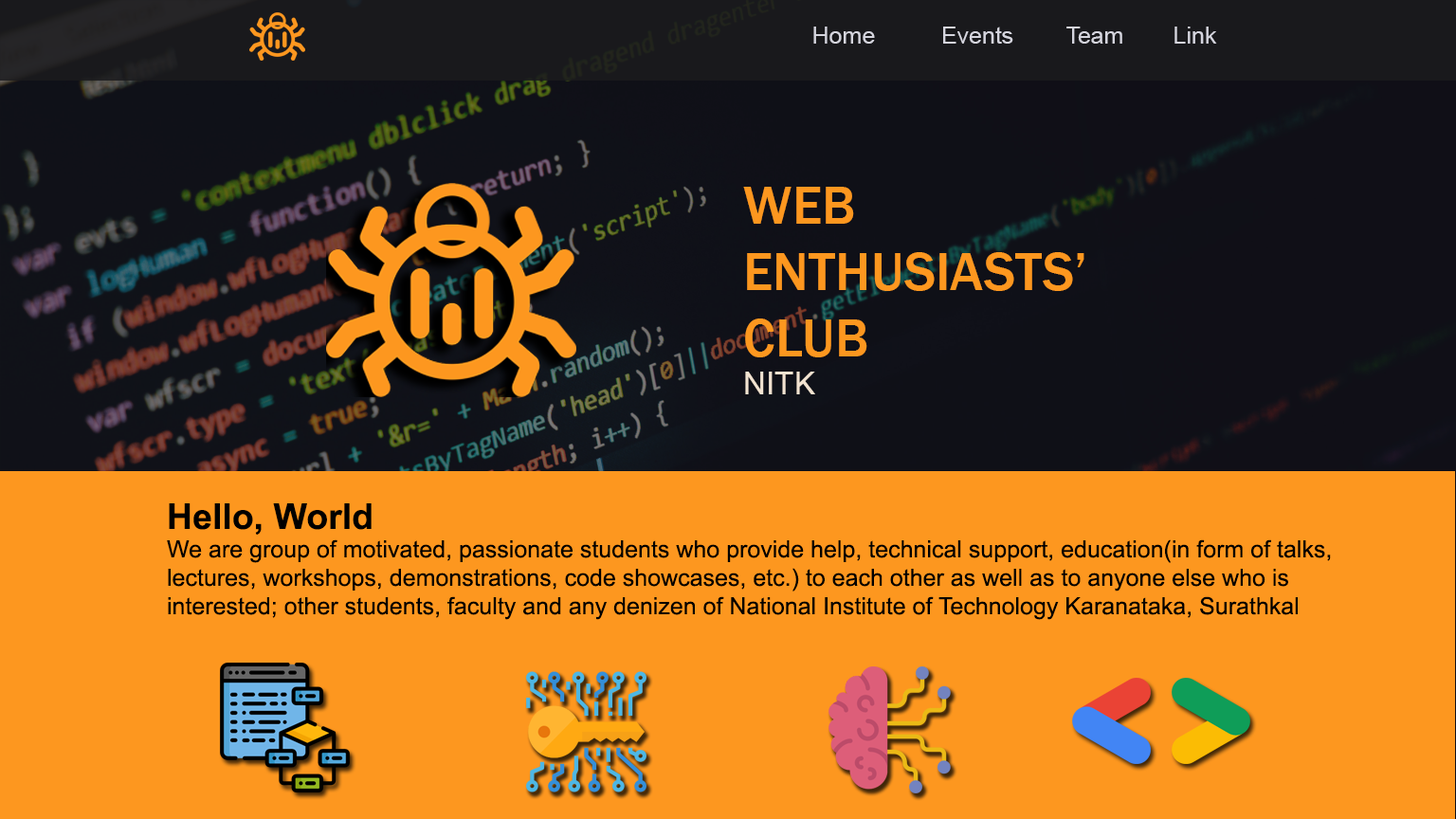
<style>
.page{position:relative;width:1456px;height:819px;background:#fd971f}
.page>*{position:absolute;margin:0}
.t1{font:23.7px "ArialMT";color:#d5d5de}
.t2{font:55.3px "FranklinGothic-Medium";color:#fd971f}
.t3{font:31.6px "ArialMT";color:#f2e3d1}
.t4{font:23.7px "ArialMT";color:#000000}
.t5{font:35.5px "Arial-BoldMT";color:#000000}
</style>
<div class="page">
<p class="t1" style="left:813px;top:27px;width:404px;height:17px">Home          Events        Team    Link</p>
<p class="t2" style="left:743px;top:187px;width:341px;height:207px;text-align:right">WEB<br>ENTHUSIASTS’<br>CLUB<br><span class="t3">NITK</span></p>
<p class="t4" style="left:167px;top:503px;width:1164px;height:117px;text-align:right"><span class="t5">Hello, World<br></span>We are group of motivated, passionate students who provide help, technical support, education(in form of talks, <br>lectures, workshops, demonstrations, code showcases, etc.) to each other as well as to anyone else who is <br>interested; other students, faculty and any denizen of National Institute of Technology Karanataka, Surathkal</p>
</div>
